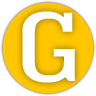
<style>
.page{position:relative;width:96px;height:96px;background:#ffffff}
.page>*{position:absolute;margin:0}
.t1{font:100px "GeometricSlab703BT-MediumCond";color:#ffffff;scale:1.41 1}
</style>
<div class="page">
<p class="t1" style="left:22px;top:11px;width:53px;height:72px">G</p>
</div>
